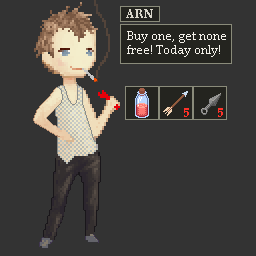
<style>
.page{position:relative;width:256px;height:256px;background:#333333}
.page>*{position:absolute;margin:0}
.t1{font:12px "PalatinoLinotype-Bold";color:#dad7cb}
.t2{font:12px "PalatinoLinotype-Roman";color:#f3f0e9}
.t3{font:12px "PalatinoLinotype-Bold";color:#ff3228}
</style>
<div class="page">
<p class="t1" style="left:126px;top:9px;width:27px;height:9px">ARN</p>
<p class="t2" style="left:127px;top:31px;width:99px;height:26px">Buy one, get none free! Today only!</p>
<p class="t3" style="left:184px;top:108px;width:5px;height:9px">5</p>
<p class="t3" style="left:218px;top:108px;width:5px;height:9px">5</p>
</div>
